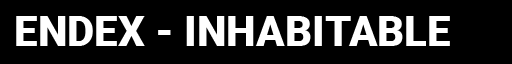
<style>
.page{position:relative;width:512px;height:64px;background:#000000}
.page>*{position:absolute;margin:0}
.t1{font:42px "Roboto-Black";color:#ffffff}
</style>
<div class="page">
<p class="t1" style="left:16px;top:16px;width:434px;height:30px">ENDEX - INHABITABLE</p>
</div>
